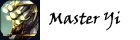
<style>
.page{position:relative;width:140px;height:40px;background:#ffffff}
.page>*{position:absolute;margin:0}
.t1{font:12px "VinerHandITC";color:#000000}
</style>
<div class="page">
<p class="t1" style="left:49px;top:11px;width:72px;height:20px">Master Yi</p>
</div>
